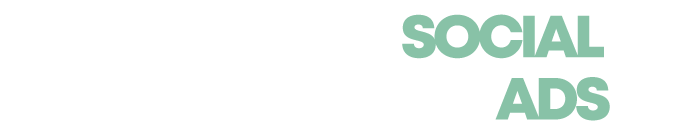
<style>
.page{position:relative;width:695px;height:140px;background:#ffffff}
.page>*{position:absolute;margin:0}
.t1{font:59.4px/62.2px "Mont-HeavyDEMO";letter-spacing:-0.08em;color:#88c2a7;text-transform:uppercase}
</style>
<div class="page">
<p class="t1" style="left:402px;top:14px;width:208px;height:107px;text-align:right">SOCIAL <br>ADS</p>
</div>
